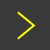
<style>
.page{position:relative;width:50px;height:50px;background:#393939}
.page>*{position:absolute;margin:0}
.t1{font:54.9px "CourierNewPSMT";color:#fcff01;scale:0.67 1}
</style>
<div class="page">
<p class="t1" style="left:17px;top:11px;width:19px;height:29px">&gt;</p>
</div>
